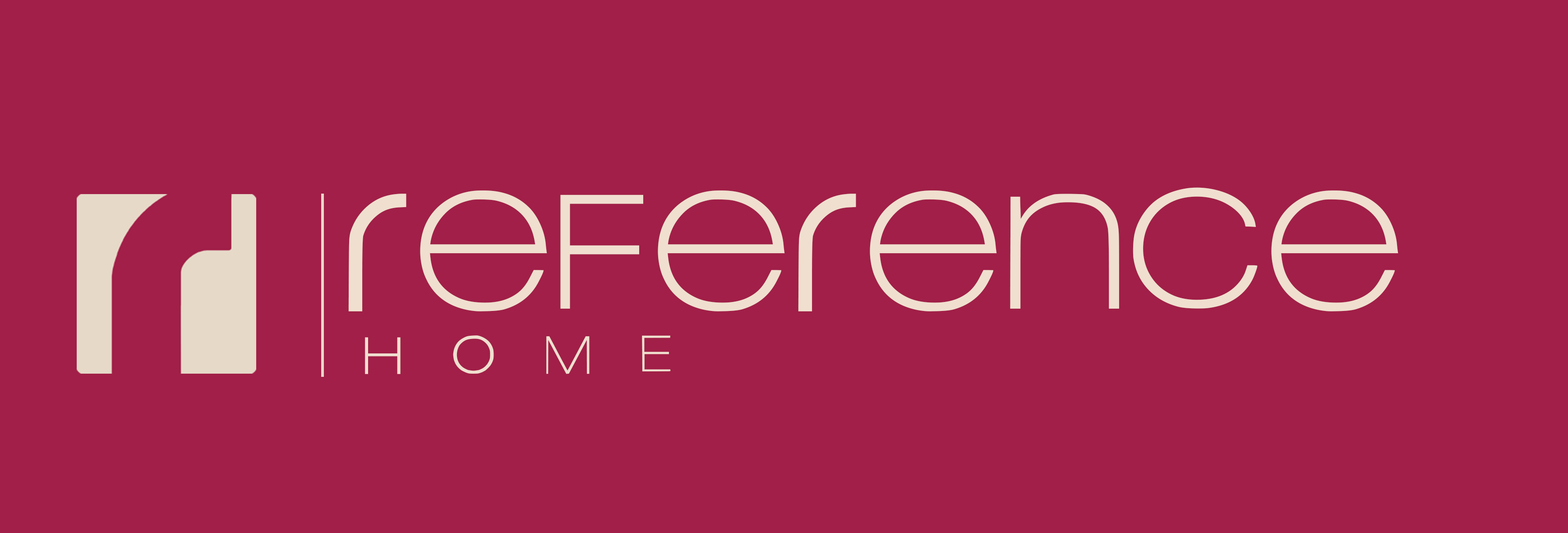
<style>
.page{position:relative;width:1568px;height:533px;background:#a11f48}
.page>*{position:absolute;margin:0}
.t1{font:149.2px "Reference-Regular";letter-spacing:-0.01em;color:#f0dfcf}
.t2{font:47.9px "Reference-Regular";letter-spacing:1em;color:#f0dfcf}
</style>
<div class="page">
<p class="t1" style="left:348px;top:187px;width:1050px;height:124px">reference</p>
<p class="t2" style="left:365px;top:335px;width:306px;height:39px">HOME</p>
</div>
